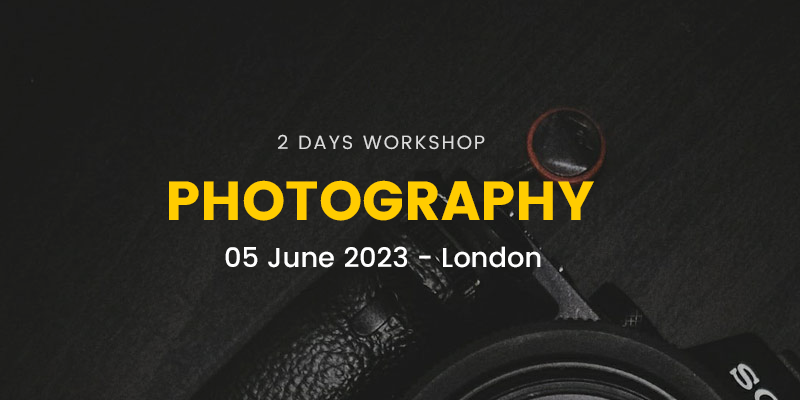
<style>
.page{position:relative;width:800px;height:400px}
.page>*{position:absolute;margin:0}
.t1{font:19.3px "Poppins-Regular";letter-spacing:0.1em;color:#dcdcdc}
.t2{font:55px "Poppins";color:#ffcc00}
.t3{font:27.3px "Poppins-Medium";color:#ffffff}
</style>
<div class="page">
<p class="t1" style="left:278px;top:134px;width:207px;height:16px">2 DAYS WORKSHOP</p>
<p class="t2" style="left:169px;top:180px;width:425px;height:41px">PHOTOGRAPHY</p>
<p class="t3" style="left:225px;top:246px;width:316px;height:22px">05 June 2023 - London</p>
</div>
